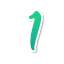
<style>
.page{position:relative;width:64px;height:64px;background:#ffffff}
.page>*{position:absolute;margin:0}
.t1{font:72px "MaroonedOnMarsBB";color:#1dc38d}
</style>
<div class="page">
<p class="t1" style="left:28px;top:11px;width:14px;height:40px">1</p>
</div>
